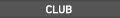
<style>
.page{position:relative;width:120px;height:18px;background:#555555}
.page>*{position:absolute;margin:0}
.t1{font:10.2px "HCRDotum-Bold";color:#ffffff}
</style>
<div class="page">
<p class="t1" style="left:46px;top:5px;width:26px;height:9px">CLUB</p>
</div>
